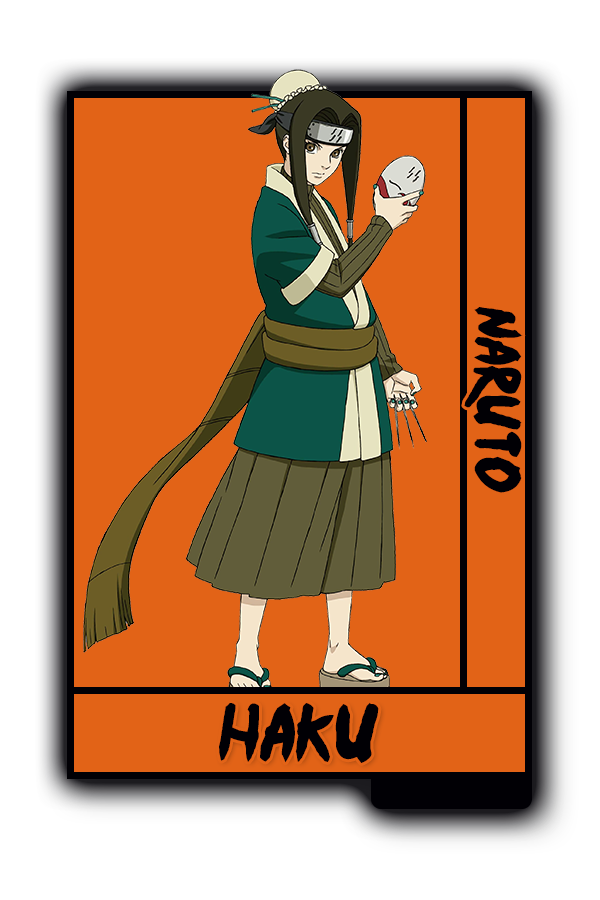
<style>
.page{position:relative;width:600px;height:900px;background:#e26317}
.page>*{position:absolute;margin:0}
.t1{font:52px "Ninja-Naruto";color:#010005}
.t2{font:65.2px "Ninja-Naruto";color:#010005}
</style>
<div class="page">
<p class="t1" style="left:464px;top:307px;width:59px;height:186px;rotate:90deg">Naruto</p>
<p class="t2" style="left:219px;top:702px;width:160px;height:61px">Haku</p>
</div>
